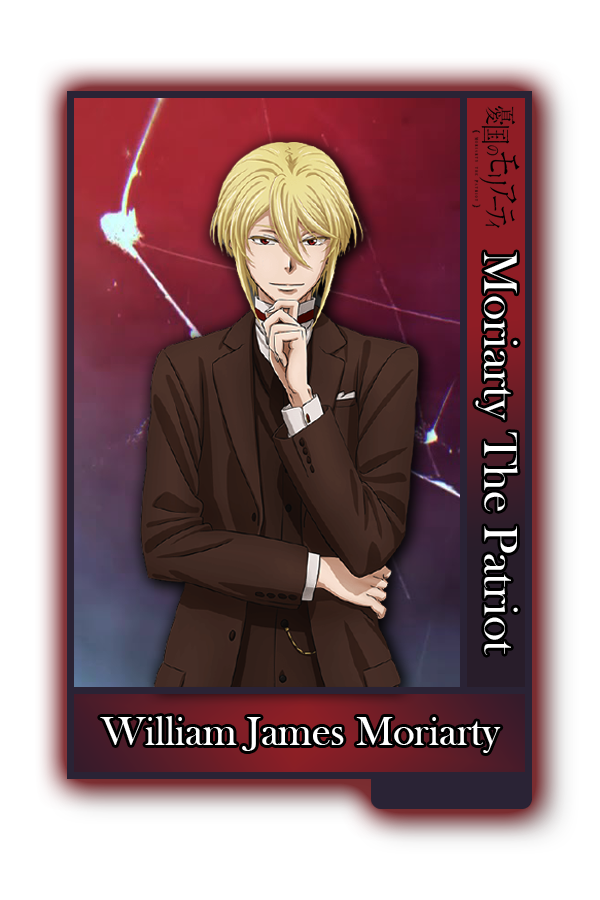
<style>
.page{position:relative;width:600px;height:900px;background:#ffffff}
.page>*{position:absolute;margin:0}
.t1{font:48.8px "BaskOldFace";color:#ffffff}
.t2{font:41.7px "BaskOldFace";color:#ffffff}
</style>
<div class="page">
<p class="t1" style="left:475px;top:252px;width:43px;height:403px;rotate:90deg">Moriarty The Patriot</p>
<p class="t2" style="left:100px;top:716px;width:401px;height:37px">William James Moriarty</p>
</div>
